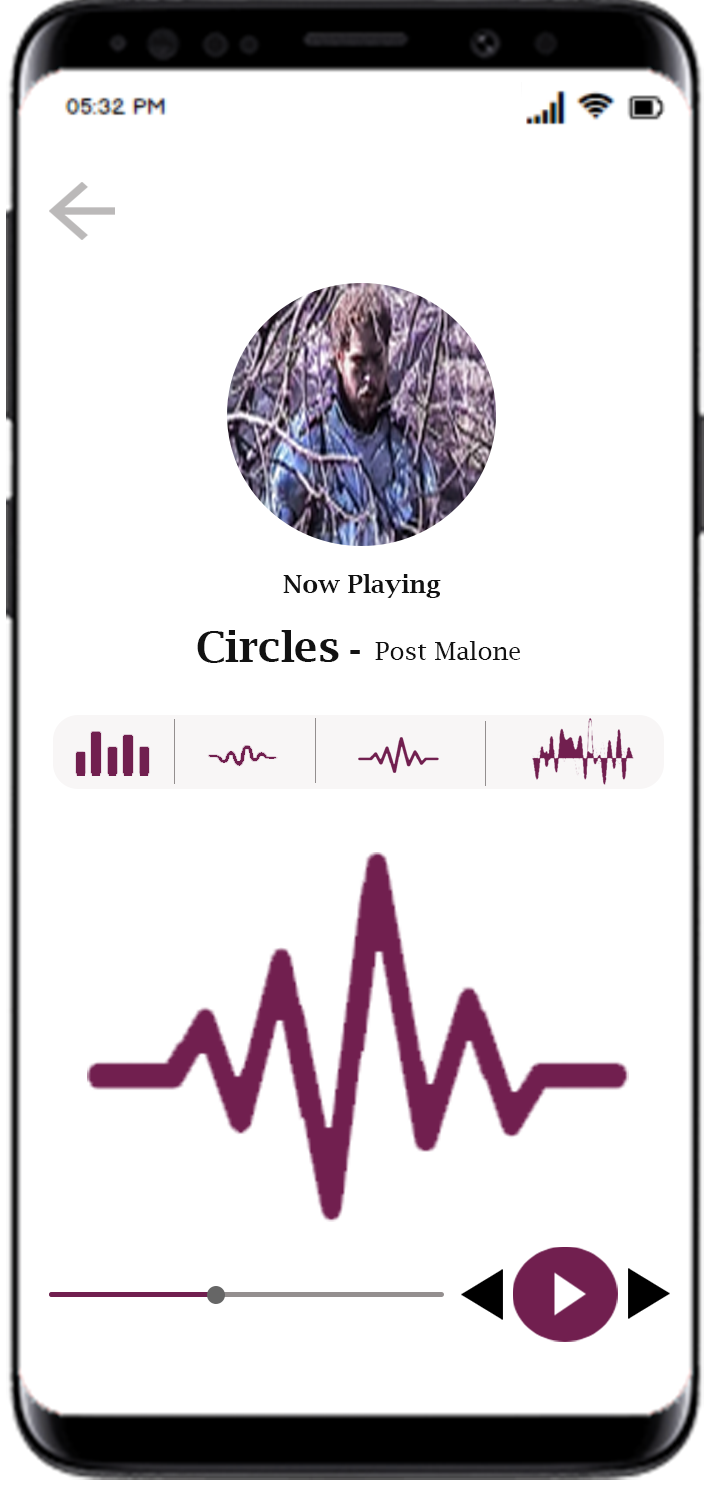
<style>
.page{position:relative;width:711px;height:1486px;background:#ffffff}
.page>*{position:absolute;margin:0}
.t1{font:25px "LucidaBright-Demi";color:#121212}
.t2{font:41.7px "LucidaBright-Demi";color:#121212}
.t3{font:25px "LucidaBright";color:#121212}
</style>
<div class="page">
<p class="t1" style="left:283px;top:574px;width:158px;height:24px">Now Playing</p>
<p class="t2" style="left:197px;top:630px;width:142px;height:33px">Circles</p>
<p class="t3" style="left:375px;top:641px;width:145px;height:19px">Post Malone</p>
<p class="t2" style="left:350px;top:650px;width:10px;height:4px">-</p>
</div>
